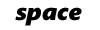
<style>
.page{position:relative;width:100px;height:30px;background:#ffffff}
.page>*{position:absolute;margin:0}
.t1{font:24px "SegoeUIBlack-Italic";color:#000000}
</style>
<div class="page">
<p class="t1" style="left:15px;top:7px;width:67px;height:19px">space</p>
</div>
